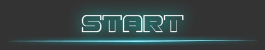
<style>
.page{position:relative;width:265px;height:50px;background:#333333}
.page>*{position:absolute;margin:0}
.t1{font:24px "Spac3neon";color:#ffffff}
</style>
<div class="page">
<p class="t1" style="left:81px;top:15px;width:103px;height:18px">start</p>
</div>
